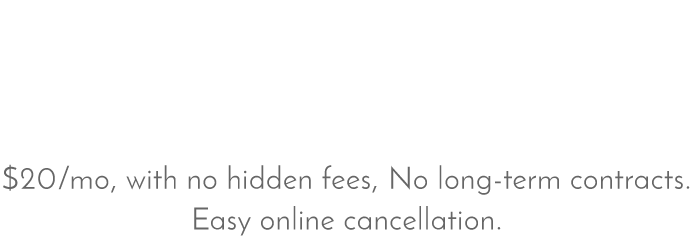
<style>
.page{position:relative;width:692px;height:249px;background:#ffffff}
.page>*{position:absolute;margin:0}
.t1{font:30.8px/40.8px "JosefinSans";letter-spacing:0.025em;color:#666666}
</style>
<div class="page">
<p class="t1" style="left:3px;top:164px;width:687px;height:72px;text-align:center">$20/mo, with no hidden fees, No long-term contracts.<br>Easy online cancellation.</p>
</div>
